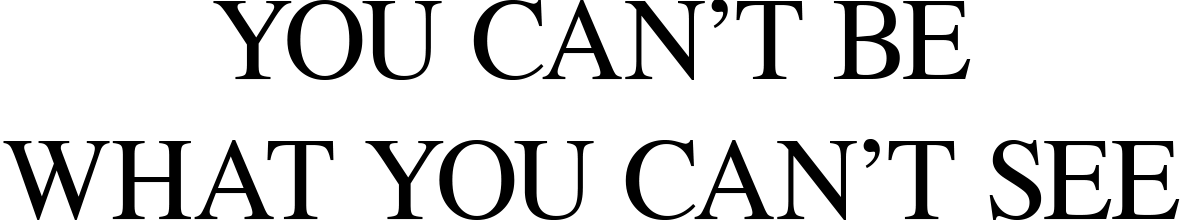
<style>
.page{position:relative;width:1190px;height:221px;background:#ffffff}
.page>*{position:absolute;margin:0}
.t1{font:116.7px "Times-Roman";letter-spacing:-0.005em;color:#000000}
</style>
<div class="page">
<p class="t1" style="left:3px;top:0px;width:1177px;height:220px;text-align:center">YOU CAN’T BE<br>WHAT YOU CAN’T SEE</p>
</div>
